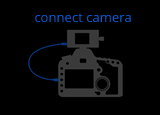
<style>
.page{position:relative;width:160px;height:115px;background:#000000}
.page>*{position:absolute;margin:0}
.t1{font:13.1px "OpenSans";color:#0b5bd3}
</style>
<div class="page">
<p class="t1" style="left:35px;top:13px;width:96px;height:9px">connect camera</p>
</div>
